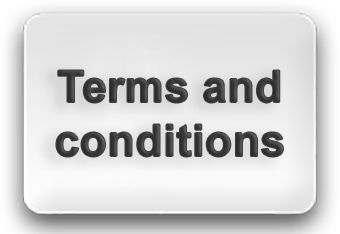
<style>
.page{position:relative;width:340px;height:234px}
.page>*{position:absolute;margin:0}
.t1{font:44px/18px "Arial-BoldMT";letter-spacing:0.02em;color:#363636}
</style>
<div class="page">
<p class="t1" style="left:56px;top:70px;width:227px;height:87px;text-align:center">Terms and<br><br><br>conditions</p>
</div>
